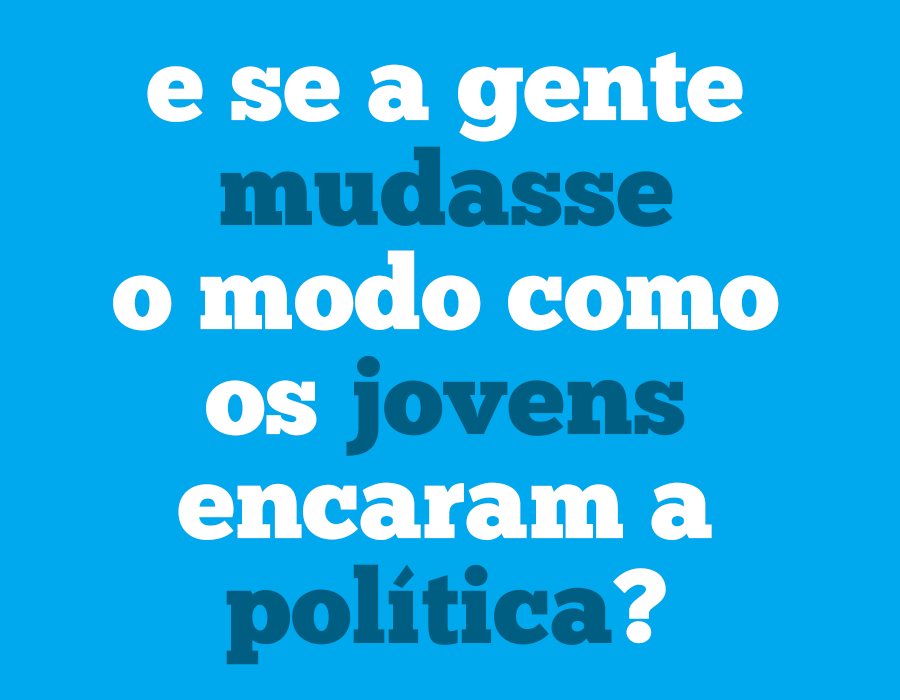
<style>
.page{position:relative;width:900px;height:700px;background:#00a9ee}
.page>*{position:absolute;margin:0}
.t1{font:104.5px/104.5px "ChunkFive-Roman";color:#ffffff}
.t2{font:104.5px/104.5px "ChunkFive-Roman";color:#005e83}
</style>
<div class="page">
<p class="t1" style="left:113px;top:52px;width:666px;height:613px;text-align:center">e se a gente<br><span class="t2">mudasse<br></span>o modo como<br>os <span class="t2">jovens<br></span>encaram a<br><span class="t2">política</span>?</p>
</div>
